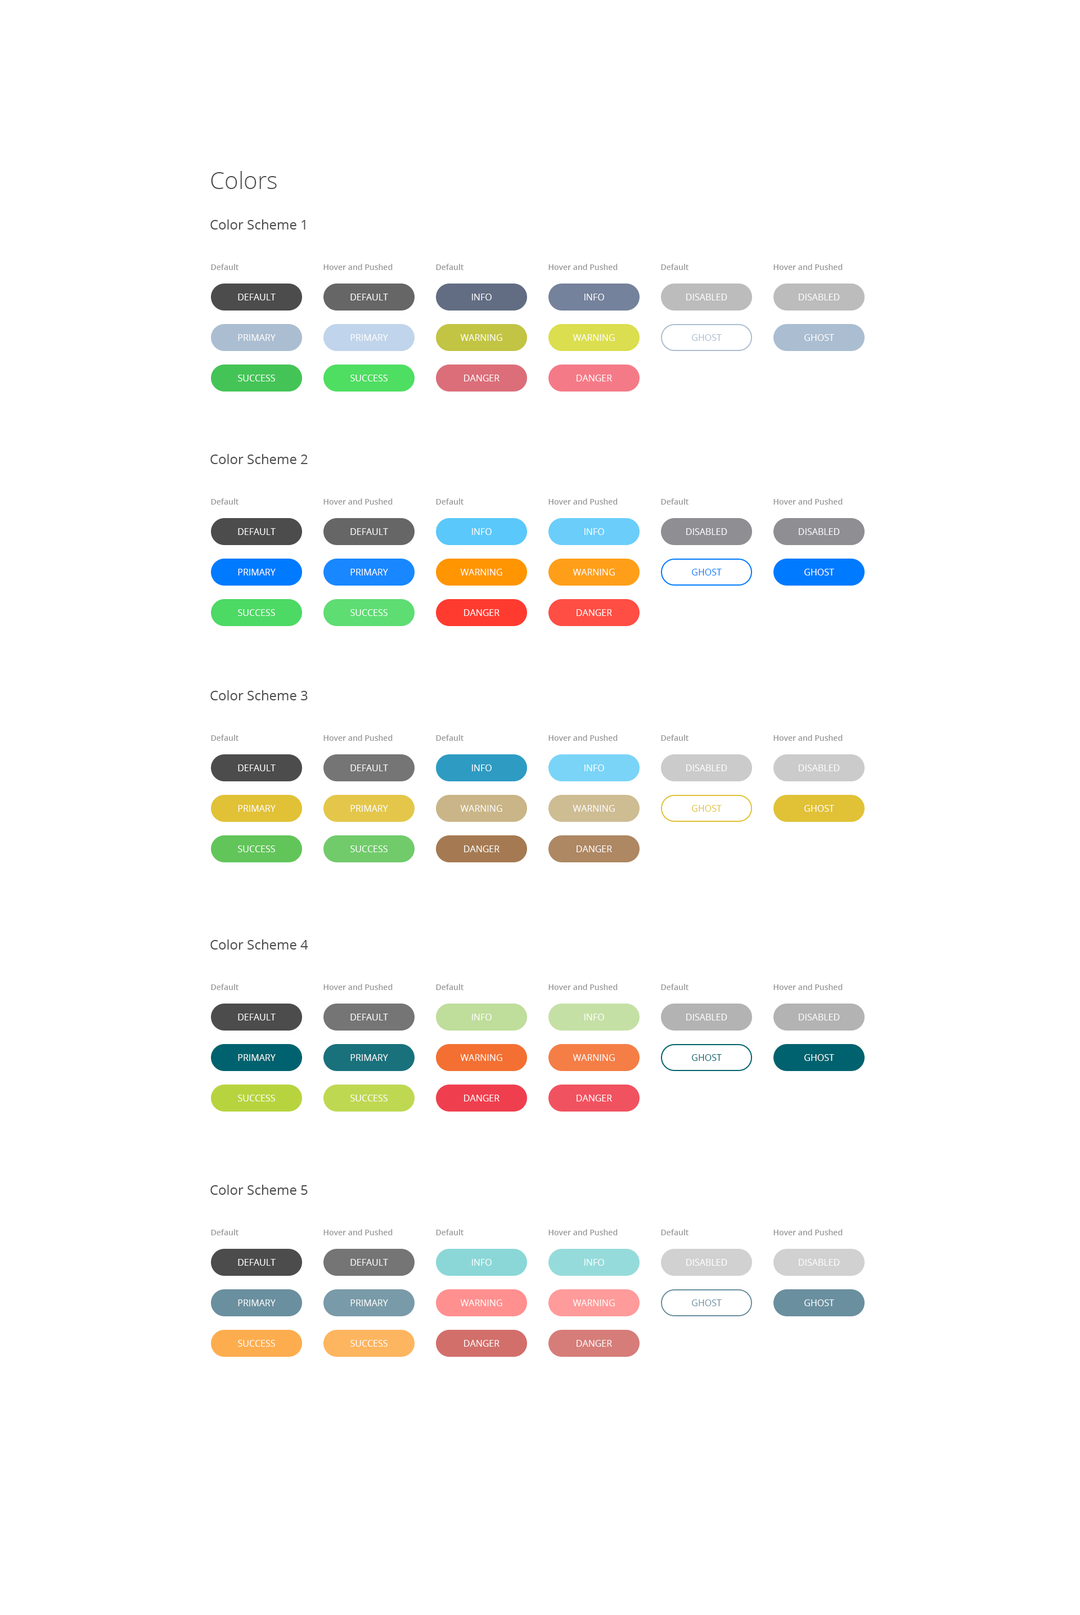
<style>
.page{position:relative;width:1080px;height:1615px;background:#ffffff}
.page>*{position:absolute;margin:0}
.t1{font:23.6px "OpenSans-Light";color:#4c4c4c}
.t2{font:13.5px "OpenSans";color:#4c4c4c}
.t3{font:7.9px "OpenSans-Semibold";color:#999999}
.t4{font:9px "OpenSans";color:#ffffff}
.t5{font:9px "OpenSans";color:#ffffff;text-transform:uppercase}
.t6{font:9px "OpenSans";color:#abbdd1;text-transform:uppercase}
.t7{font:9px "OpenSans";color:#007aff;text-transform:uppercase}
.t8{font:9px "OpenSans";color:#e1c136;text-transform:uppercase}
.t9{font:9px "OpenSans";color:#00626e;text-transform:uppercase}
.t10{font:9px "OpenSans";color:#6a8f9f;text-transform:uppercase}
</style>
<div class="page">
<p class="t1" style="left:211px;top:171px;width:66px;height:18px">Colors</p>
<p class="t2" style="left:210px;top:219px;width:95px;height:11px">Color Scheme 1</p>
<p class="t3" style="left:211px;top:264px;width:27px;height:6px">Default</p>
<p class="t3" style="left:323px;top:264px;width:70px;height:6px">Hover and Pushed</p>
<p class="t3" style="left:436px;top:264px;width:28px;height:6px">Default</p>
<p class="t3" style="left:548px;top:264px;width:70px;height:6px">Hover and Pushed</p>
<p class="t3" style="left:661px;top:264px;width:27px;height:6px">Default</p>
<p class="t3" style="left:773px;top:264px;width:70px;height:6px">Hover and Pushed</p>
<p class="t4" style="left:238px;top:294px;width:38px;height:6px">DEFAULT</p>
<p class="t4" style="left:350px;top:294px;width:38px;height:6px">DEFAULT</p>
<p class="t5" style="left:472px;top:294px;width:20px;height:6px">Info</p>
<p class="t5" style="left:584px;top:294px;width:20px;height:6px">info</p>
<p class="t5" style="left:686px;top:294px;width:41px;height:6px">Disabled</p>
<p class="t5" style="left:799px;top:294px;width:41px;height:6px">Disabled</p>
<p class="t5" style="left:238px;top:334px;width:38px;height:7px">Primary</p>
<p class="t5" style="left:350px;top:334px;width:38px;height:7px">Primary</p>
<p class="t5" style="left:460px;top:334px;width:42px;height:7px">Warning</p>
<p class="t5" style="left:573px;top:334px;width:42px;height:7px">Warning</p>
<p class="t6" style="left:692px;top:334px;width:30px;height:7px">Ghost</p>
<p class="t5" style="left:804px;top:334px;width:30px;height:7px">Ghost</p>
<p class="t5" style="left:238px;top:375px;width:37px;height:6px">Success</p>
<p class="t5" style="left:350px;top:375px;width:38px;height:6px">Success</p>
<p class="t5" style="left:464px;top:375px;width:36px;height:6px">Danger</p>
<p class="t5" style="left:577px;top:375px;width:35px;height:6px">Danger</p>
<p class="t2" style="left:210px;top:454px;width:98px;height:10px">Color Scheme 2</p>
<p class="t3" style="left:211px;top:498px;width:27px;height:7px">Default</p>
<p class="t3" style="left:323px;top:498px;width:70px;height:7px">Hover and Pushed</p>
<p class="t3" style="left:436px;top:498px;width:28px;height:7px">Default</p>
<p class="t3" style="left:548px;top:498px;width:70px;height:7px">Hover and Pushed</p>
<p class="t3" style="left:661px;top:498px;width:27px;height:7px">Default</p>
<p class="t3" style="left:773px;top:498px;width:70px;height:7px">Hover and Pushed</p>
<p class="t4" style="left:238px;top:528px;width:38px;height:7px">DEFAULT</p>
<p class="t4" style="left:350px;top:528px;width:38px;height:7px">DEFAULT</p>
<p class="t5" style="left:472px;top:528px;width:20px;height:7px">Info</p>
<p class="t5" style="left:584px;top:528px;width:20px;height:7px">info</p>
<p class="t5" style="left:686px;top:528px;width:41px;height:7px">Disabled</p>
<p class="t5" style="left:799px;top:528px;width:41px;height:7px">Disabled</p>
<p class="t5" style="left:238px;top:569px;width:38px;height:6px">Primary</p>
<p class="t5" style="left:350px;top:569px;width:38px;height:6px">Primary</p>
<p class="t5" style="left:460px;top:569px;width:42px;height:6px">Warning</p>
<p class="t5" style="left:573px;top:569px;width:42px;height:6px">Warning</p>
<p class="t7" style="left:692px;top:569px;width:30px;height:6px">Ghost</p>
<p class="t5" style="left:804px;top:569px;width:30px;height:6px">Ghost</p>
<p class="t5" style="left:238px;top:609px;width:37px;height:7px">Success</p>
<p class="t5" style="left:350px;top:609px;width:38px;height:7px">Success</p>
<p class="t5" style="left:464px;top:609px;width:36px;height:7px">Danger</p>
<p class="t5" style="left:577px;top:609px;width:35px;height:7px">Danger</p>
<p class="t2" style="left:210px;top:690px;width:98px;height:10px">Color Scheme 3</p>
<p class="t3" style="left:211px;top:735px;width:27px;height:6px">Default</p>
<p class="t3" style="left:323px;top:735px;width:70px;height:6px">Hover and Pushed</p>
<p class="t3" style="left:436px;top:735px;width:28px;height:6px">Default</p>
<p class="t3" style="left:548px;top:735px;width:70px;height:6px">Hover and Pushed</p>
<p class="t3" style="left:661px;top:735px;width:27px;height:6px">Default</p>
<p class="t3" style="left:773px;top:735px;width:70px;height:6px">Hover and Pushed</p>
<p class="t4" style="left:238px;top:764px;width:38px;height:7px">DEFAULT</p>
<p class="t4" style="left:350px;top:764px;width:38px;height:7px">DEFAULT</p>
<p class="t5" style="left:472px;top:764px;width:20px;height:7px">Info</p>
<p class="t5" style="left:584px;top:764px;width:20px;height:7px">info</p>
<p class="t5" style="left:686px;top:764px;width:41px;height:7px">Disabled</p>
<p class="t5" style="left:799px;top:764px;width:41px;height:7px">Disabled</p>
<p class="t5" style="left:238px;top:805px;width:38px;height:7px">Primary</p>
<p class="t5" style="left:350px;top:805px;width:38px;height:7px">Primary</p>
<p class="t5" style="left:460px;top:805px;width:42px;height:7px">Warning</p>
<p class="t5" style="left:573px;top:805px;width:42px;height:7px">Warning</p>
<p class="t8" style="left:692px;top:805px;width:30px;height:7px">Ghost</p>
<p class="t5" style="left:804px;top:805px;width:30px;height:7px">Ghost</p>
<p class="t5" style="left:238px;top:845px;width:37px;height:7px">Success</p>
<p class="t5" style="left:350px;top:845px;width:38px;height:7px">Success</p>
<p class="t5" style="left:464px;top:845px;width:36px;height:7px">Danger</p>
<p class="t5" style="left:577px;top:845px;width:35px;height:7px">Danger</p>
<p class="t2" style="left:210px;top:939px;width:98px;height:11px">Color Scheme 4</p>
<p class="t3" style="left:211px;top:984px;width:27px;height:6px">Default</p>
<p class="t3" style="left:323px;top:984px;width:70px;height:6px">Hover and Pushed</p>
<p class="t3" style="left:436px;top:984px;width:28px;height:6px">Default</p>
<p class="t3" style="left:548px;top:984px;width:70px;height:6px">Hover and Pushed</p>
<p class="t3" style="left:661px;top:984px;width:27px;height:6px">Default</p>
<p class="t3" style="left:773px;top:984px;width:70px;height:6px">Hover and Pushed</p>
<p class="t4" style="left:238px;top:1014px;width:38px;height:6px">DEFAULT</p>
<p class="t4" style="left:350px;top:1014px;width:38px;height:6px">DEFAULT</p>
<p class="t5" style="left:472px;top:1014px;width:20px;height:6px">Info</p>
<p class="t5" style="left:584px;top:1014px;width:20px;height:6px">info</p>
<p class="t5" style="left:686px;top:1014px;width:41px;height:6px">Disabled</p>
<p class="t5" style="left:799px;top:1014px;width:41px;height:6px">Disabled</p>
<p class="t5" style="left:238px;top:1054px;width:38px;height:7px">Primary</p>
<p class="t5" style="left:350px;top:1054px;width:38px;height:7px">Primary</p>
<p class="t5" style="left:460px;top:1054px;width:42px;height:7px">Warning</p>
<p class="t5" style="left:573px;top:1054px;width:42px;height:7px">Warning</p>
<p class="t9" style="left:692px;top:1054px;width:30px;height:7px">Ghost</p>
<p class="t5" style="left:804px;top:1054px;width:30px;height:7px">Ghost</p>
<p class="t5" style="left:238px;top:1095px;width:37px;height:6px">Success</p>
<p class="t5" style="left:350px;top:1095px;width:38px;height:6px">Success</p>
<p class="t5" style="left:464px;top:1095px;width:36px;height:6px">Danger</p>
<p class="t5" style="left:577px;top:1095px;width:35px;height:6px">Danger</p>
<p class="t2" style="left:210px;top:1185px;width:98px;height:10px">Color Scheme 5</p>
<p class="t3" style="left:211px;top:1229px;width:27px;height:6px">Default</p>
<p class="t3" style="left:323px;top:1229px;width:70px;height:6px">Hover and Pushed</p>
<p class="t3" style="left:436px;top:1229px;width:28px;height:6px">Default</p>
<p class="t3" style="left:548px;top:1229px;width:70px;height:6px">Hover and Pushed</p>
<p class="t3" style="left:661px;top:1229px;width:27px;height:6px">Default</p>
<p class="t3" style="left:773px;top:1229px;width:70px;height:6px">Hover and Pushed</p>
<p class="t4" style="left:238px;top:1259px;width:38px;height:7px">DEFAULT</p>
<p class="t4" style="left:350px;top:1259px;width:38px;height:7px">DEFAULT</p>
<p class="t5" style="left:472px;top:1259px;width:20px;height:7px">Info</p>
<p class="t5" style="left:584px;top:1259px;width:20px;height:7px">info</p>
<p class="t5" style="left:686px;top:1259px;width:41px;height:7px">Disabled</p>
<p class="t5" style="left:799px;top:1259px;width:41px;height:7px">Disabled</p>
<p class="t5" style="left:238px;top:1299px;width:38px;height:7px">Primary</p>
<p class="t5" style="left:350px;top:1299px;width:38px;height:7px">Primary</p>
<p class="t5" style="left:460px;top:1299px;width:42px;height:7px">Warning</p>
<p class="t5" style="left:573px;top:1299px;width:42px;height:7px">Warning</p>
<p class="t10" style="left:692px;top:1299px;width:30px;height:7px">Ghost</p>
<p class="t5" style="left:804px;top:1299px;width:30px;height:7px">Ghost</p>
<p class="t5" style="left:238px;top:1340px;width:37px;height:7px">Success</p>
<p class="t5" style="left:350px;top:1340px;width:38px;height:7px">Success</p>
<p class="t5" style="left:464px;top:1340px;width:36px;height:7px">Danger</p>
<p class="t5" style="left:577px;top:1340px;width:35px;height:7px">Danger</p>
</div>
